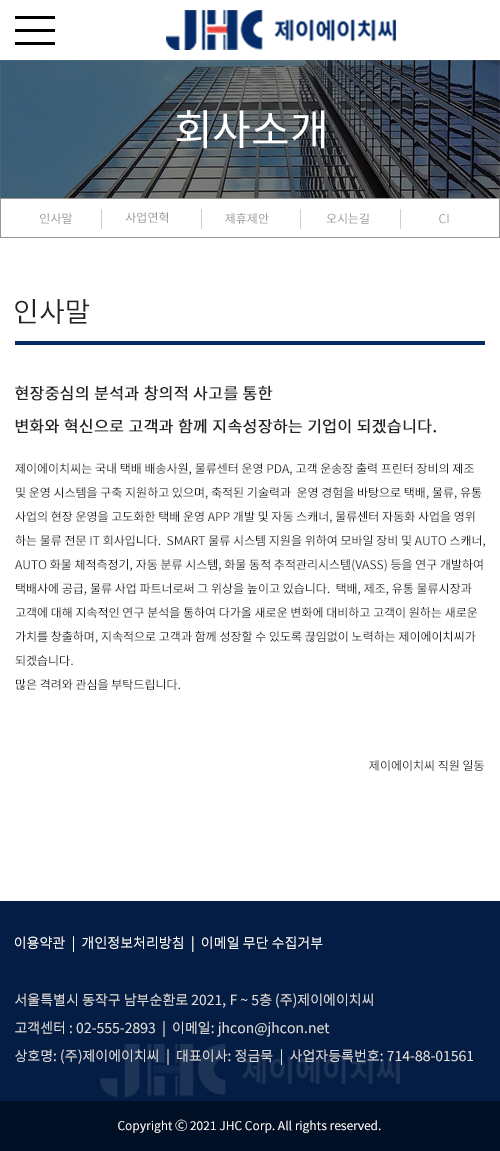
<style>
.page{position:relative;width:500px;height:1151px;background:#ffffff}
.page>*{position:absolute;margin:0}
.t1{font:42px "NotoSansKR-Regular";color:#ffffff}
.t2{font:12px "NotoSansKR-Regular";color:#959595}
.t3{font:28px "NotoSansKR-Regular";color:#242424}
.t4{font:16px/33px "NotoSansKR-Regular";color:#242424;font-weight:bold}
.t5{font:12px/24px "NotoSansKR-Regular";color:#242424}
.t6{font:12px "NotoSansKR-Regular";color:#242424}
.t7{font:14px "NotoSansKR-Regular";color:#ffffff}
.t8{font:14px/28px "NotoSansKR-Regular";color:#dddddd}
.t9{font:12px "NotoSansKR-Regular";color:#ffffff}
</style>
<div class="page">
<p class="t1" style="left:176px;top:110px;width:149px;height:39px">회사소개</p>
<p class="t2" style="left:40px;top:213px;width:32px;height:11px">인사말</p>
<p class="t2" style="left:125px;top:212px;width:43px;height:11px">사업연혁</p>
<p class="t2" style="left:225px;top:213px;width:44px;height:11px">제휴제안</p>
<p class="t2" style="left:326px;top:213px;width:43px;height:11px">오시는길</p>
<p class="t2" style="left:439px;top:214px;width:10px;height:10px">CI</p>
<p class="t3" style="left:15px;top:299px;width:75px;height:25px">인사말</p>
<p class="t4" style="left:15px;top:385px;width:421px;height:49px">현장중심의 분석과 창의적 사고를 통한 <br>변화와 혁신으로 고객과 함께 지속성장하는 기업이 되겠습니다.</p>
<p class="t5" style="left:15px;top:463px;width:470px;height:227px">제이에이치씨는 국내 택배 배송사원, 물류센터 운영 PDA, 고객 운송장 출력 프린터 장비의 제조 <br>및 운영 시스템을 구축 지원하고 있으며, 축적된 기술력과  운영 경험을 바탕으로 택배, 물류, 유통<br>사업의 현장 운영을 고도화한 택배 운영 APP 개발 및 자동 스캐너, 물류센터 자동화 사업을 영위<br>하는 물류 전문 IT 회사입니다.  SMART 물류 시스템 지원을 위하여 모바일 장비 및 AUTO 스캐너,<br>AUTO 화물 체적측정기, 자동 분류 시스템, 화물 동적 추적관리시스템(VASS) 등을 연구 개발하여<br>택배사에 공급, 물류 사업 파트너로써 그 위상을 높이고 있습니다.  택배, 제조, 유통 물류시장과<br>고객에 대해 지속적인 연구 분석을 통하여 다가올 새로운 변화에 대비하고 고객이 원하는 새로운<br>가치를 창출하며, 지속적으로 고객과 함께 성장할 수 있도록 끊임없이 노력하는 제이에이치씨가<br>되겠습니다.<br>많은 격려와 관심을 부탁드립니다.</p>
<p class="t6" style="left:369px;top:760px;width:115px;height:11px">제이에이치씨 직원 일동</p>
<p class="t7" style="left:15px;top:936px;width:308px;height:16px">이용약관  |  개인정보처리방침  |  이메일 무단 수집거부</p>
<p class="t8" style="left:15px;top:993px;width:458px;height:72px">서울특별시 동작구 남부순환로 2021, F ~ 5층 (주)제이에이치씨<br>고객센터 : 02-555-2893  |  이메일: jhcon@jhcon.net<br>상호명: (주)제이에이치씨  |  대표이사: 정금묵  |  사업자등록번호: 714-88-01561</p>
<p class="t9" style="left:118px;top:1119px;width:263px;height:14px">Copyright Ⓒ 2021 JHC Corp. All rights reserved.</p>
</div>
